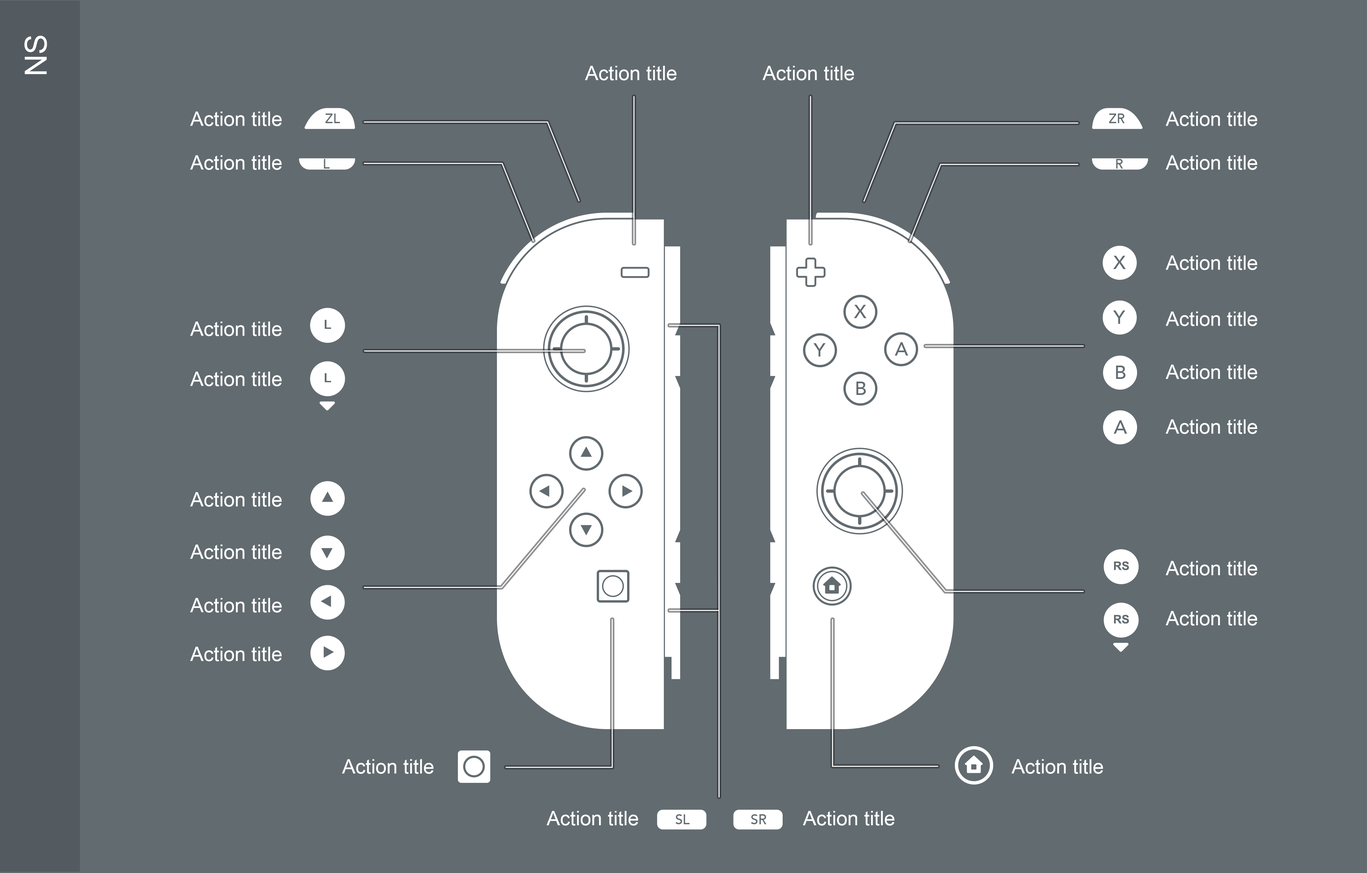
<style>
.page{position:relative;width:1367px;height:873px;background:#626b70}
.page>*{position:absolute;margin:0}
.t1{font:30.5px "ArialMT";color:#ffffff}
.t2{font:20px "ArialMT";color:#ffffff}
</style>
<div class="page">
<p class="t1" style="left:24px;top:36px;width:23px;height:38px;rotate:-90deg">NS</p>
<p class="t2" style="left:585px;top:66px;width:91px;height:14px">Action title</p>
<p class="t2" style="left:762px;top:66px;width:92px;height:14px">Action title</p>
<p class="t2" style="left:190px;top:111px;width:92px;height:15px">Action title</p>
<p class="t2" style="left:1165px;top:111px;width:92px;height:15px">Action title</p>
<p class="t2" style="left:190px;top:155px;width:92px;height:15px">Action title</p>
<p class="t2" style="left:1165px;top:155px;width:92px;height:15px">Action title</p>
<p class="t2" style="left:1165px;top:255px;width:92px;height:15px">Action title</p>
<p class="t2" style="left:1165px;top:311px;width:92px;height:15px">Action title</p>
<p class="t2" style="left:190px;top:321px;width:92px;height:15px">Action title</p>
<p class="t2" style="left:1165px;top:364px;width:92px;height:15px">Action title</p>
<p class="t2" style="left:190px;top:371px;width:92px;height:15px">Action title</p>
<p class="t2" style="left:1165px;top:419px;width:92px;height:15px">Action title</p>
<p class="t2" style="left:190px;top:492px;width:92px;height:14px">Action title</p>
<p class="t2" style="left:190px;top:544px;width:92px;height:15px">Action title</p>
<p class="t2" style="left:1165px;top:561px;width:92px;height:14px">Action title</p>
<p class="t2" style="left:190px;top:598px;width:92px;height:14px">Action title</p>
<p class="t2" style="left:1165px;top:611px;width:92px;height:14px">Action title</p>
<p class="t2" style="left:190px;top:646px;width:92px;height:15px">Action title</p>
<p class="t2" style="left:342px;top:759px;width:91px;height:14px">Action title</p>
<p class="t2" style="left:1011px;top:759px;width:92px;height:14px">Action title</p>
<p class="t2" style="left:546px;top:810px;width:92px;height:15px">Action title</p>
<p class="t2" style="left:802px;top:810px;width:92px;height:15px">Action title</p>
</div>
